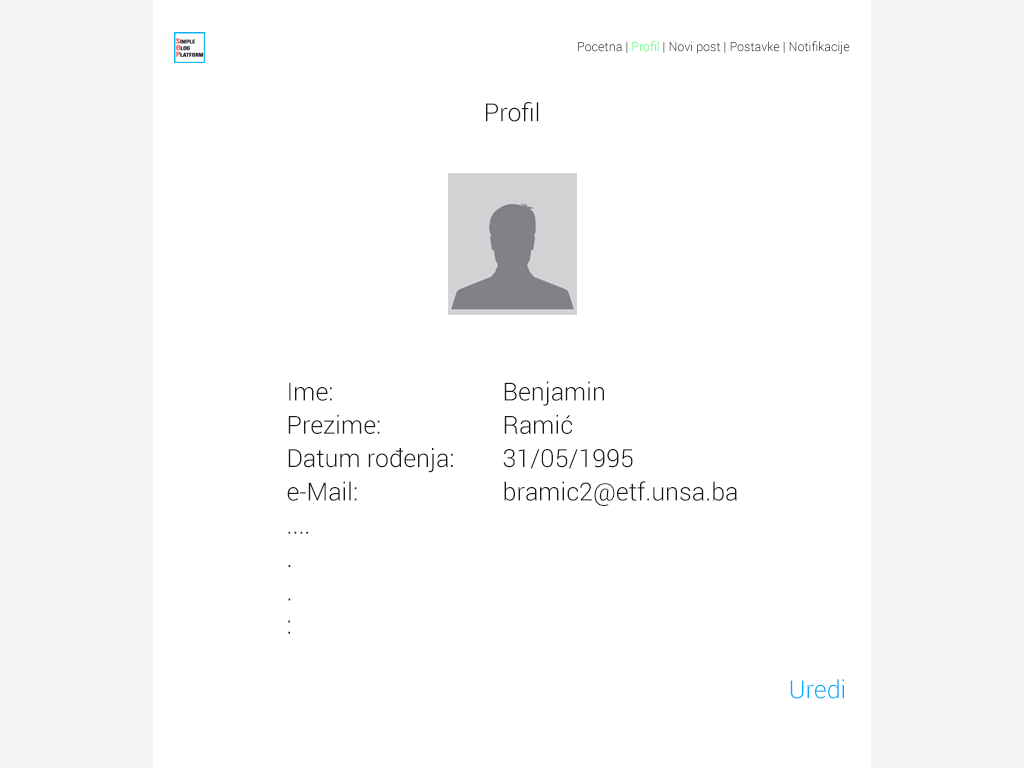
<style>
.page{position:relative;width:1024px;height:768px;background:#ffffff}
.page>*{position:absolute;margin:0}
.t1{font:12.5px "Roboto-Light"}
.t2{font:25px "Roboto-Light";color:#1b1b1b}
.t3{font:25px/33.3px "Roboto-Light";color:#1b1b1b}
.t4{font:25px "Roboto-Light";color:#00aeff}
</style>
<div class="page">
<p class="t1" style="left:578px;top:41px;width:272px;height:13px">Pocetna | Profil | Novi post | Postavke | Notifikacije</p>
<p class="t2" style="left:486px;top:102px;width:53px;height:20px">Profil</p>
<p class="t3" style="left:287px;top:381px;width:450px;height:253px">Ime:      Benjamin<br>Prezime:     Ramić<br>Datum rođenja:   31/05/1995<br>e-Mail:     bramic2@etf.unsa.ba<br>....<br>.<br>.<br>:</p>
<p class="t4" style="left:790px;top:679px;width:54px;height:20px">Uredi</p>
</div>
